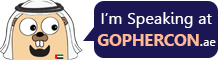
<style>
.page{position:relative;width:220px;height:60px;background:#1b1754}
.page>*{position:absolute;margin:0}
.t1{font:16.4px "Leelawadee";color:#ffffff}
.t2{font:16.6px "Leelawadee-Bold";color:#ffb997}
.t3{font:16.6px "Leelawadee";color:#ffffff}
.t4{font:12.4px "Leelawadee";color:#ffffff}
</style>
<div class="page">
<p class="t1" style="left:101px;top:12px;width:111px;height:16px">I’m Speaking at</p>
<p class="t2" style="left:97px;top:34px;width:119px;height:12px">GOPHERCON<span class="t3">.</span><span class="t4">ae</span></p>
</div>
